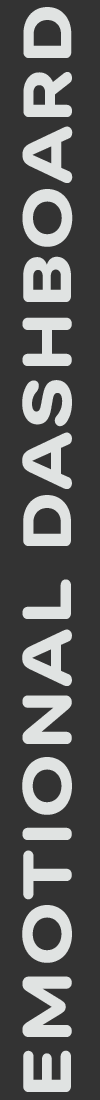
<style>
.page{position:relative;width:100px;height:1100px;background:#333333}
.page>*{position:absolute;margin:0}
.t1{font:68.1px "GTMaru-Bold";color:#e0e3e2;scale:1.16 1}
</style>
<div class="page">
<p class="t1" style="left:22px;top:7px;width:51px;height:1085px;rotate:-90deg">EMOTIONAL DASHBOARD</p>
</div>
